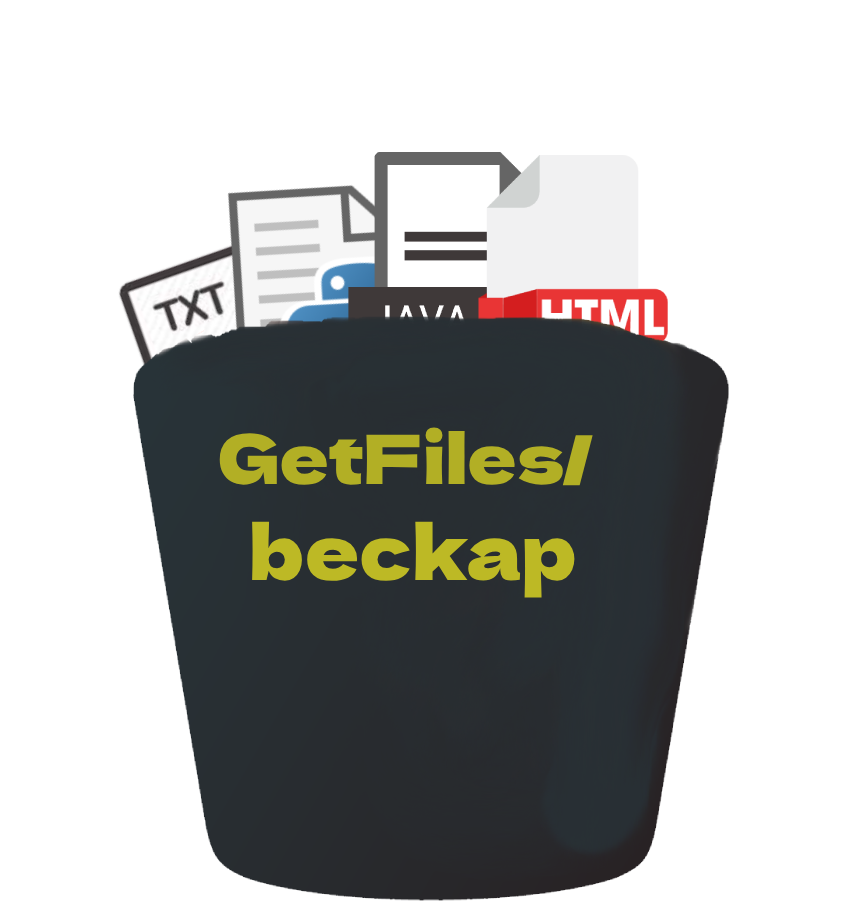
<style>
.page{position:relative;width:860px;height:901px;background:#ffffff}
.page>*{position:absolute;margin:0}
.t1{font:68px "DelaGothicOne-Regular";color:#b2af25}
.t2{font:75px "DelaGothicOne-Regular";color:#bdb925}
</style>
<div class="page">
<p class="t1" style="left:219px;top:427px;width:374px;height:59px">GetFiles/</p>
<p class="t2" style="left:252px;top:521px;width:323px;height:77px">beckap</p>
</div>
